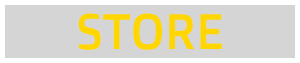
<style>
.page{position:relative;width:300px;height:63px;background:#d5d5d5}
.page>*{position:absolute;margin:0}
.t1{font:50px "DoppioOne-Regular";color:#ffd600}
</style>
<div class="page">
<p class="t1" style="left:78px;top:13px;width:144px;height:37px">STORE</p>
</div>
